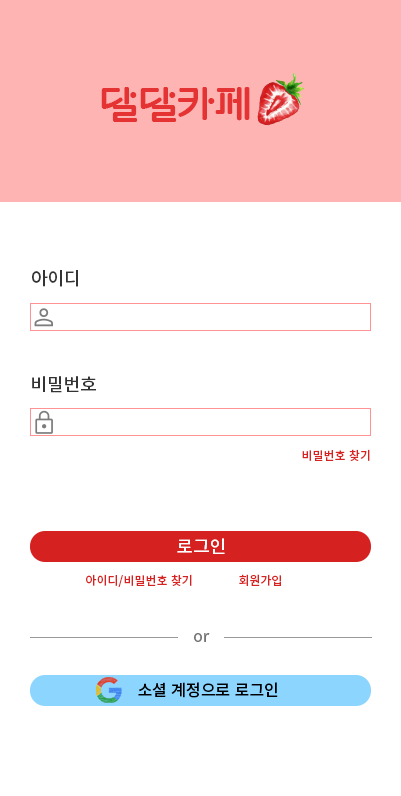
<style>
.page{position:relative;width:401px;height:796px;background:#ffffff}
.page>*{position:absolute;margin:0}
.t1{font:38.7px "Gugi-Regular";color:#e53232}
.t2{font:18px "NotoSansKR-Medium";color:#333333}
.t3{font:12px "NotoSansKR-Medium";color:#d72222}
.t4{font:18px "NotoSansKR-Medium";color:#ffffff}
.t5{font:16px "NotoSansKR-Medium";color:#747474}
.t6{font:16px "NotoSansKR-Medium";color:#000000}
</style>
<div class="page">
<p class="t1" style="left:101px;top:87px;width:149px;height:35px">달달카페</p>
<p class="t2" style="left:32px;top:270px;width:46px;height:17px">아이디</p>
<p class="t2" style="left:32px;top:376px;width:64px;height:17px">비밀번호</p>
<p class="t3" style="left:302px;top:449px;width:68px;height:12px">비밀번호 찾기</p>
<p class="t4" style="left:177px;top:538px;width:48px;height:16px">로그인</p>
<p class="t3" style="left:86px;top:574px;width:106px;height:13px">아이디/비밀번호 찾기</p>
<p class="t3" style="left:239px;top:574px;width:42px;height:12px">회원가입</p>
<p class="t5" style="left:194px;top:633px;width:16px;height:9px">or</p>
<p class="t6" style="left:138px;top:682px;width:140px;height:16px">소셜 계정으로 로그인</p>
</div>
